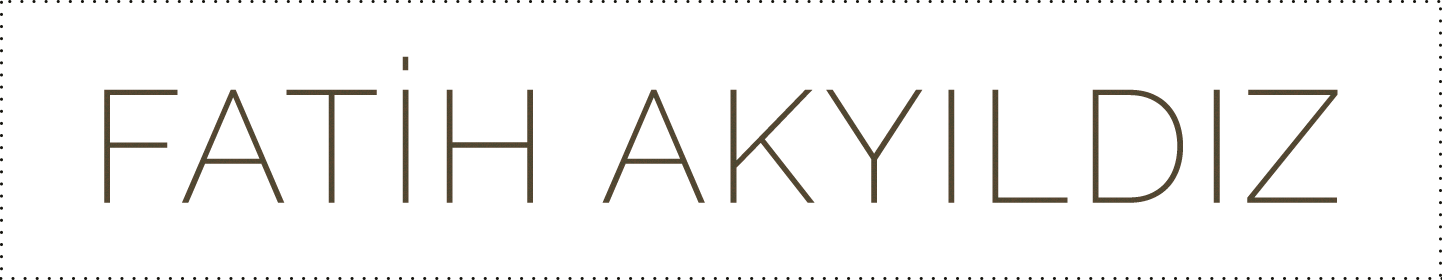
<style>
.page{position:relative;width:1442px;height:280px;background:#ffffff}
.page>*{position:absolute;margin:0}
.t1{font:158.6px "Raleway-ExtraLight";letter-spacing:0.05em;color:#4a4732}
</style>
<div class="page">
<p class="t1" style="left:104px;top:56px;width:1234px;height:147px">FATİH AKYILDIZ</p>
</div>
